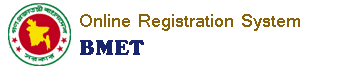
<style>
.page{position:relative;width:350px;height:70px;background:#ffffff}
.page>*{position:absolute;margin:0}
.t1{font:19.4px "Shruti";color:#87620b}
.t2{font:22.2px "CooperBlack";color:#18246c}
</style>
<div class="page">
<p class="t1" style="left:80px;top:14px;width:220px;height:17px">Online Registration System</p>
<p class="t2" style="left:80px;top:40px;width:64px;height:15px">BMET</p>
</div>
